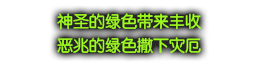
<style>
.page{position:relative;width:256px;height:64px;background:#ffffff}
.page>*{position:absolute;margin:0}
.t1{font:16px/24px "FZY3--GB1-4";color:#a0ff1e}
</style>
<div class="page">
<p class="t1" style="left:57px;top:13px;width:144px;height:41px;text-align:center">神圣的绿色带来丰收<br>恶兆的绿色撒下灾厄</p>
</div>
